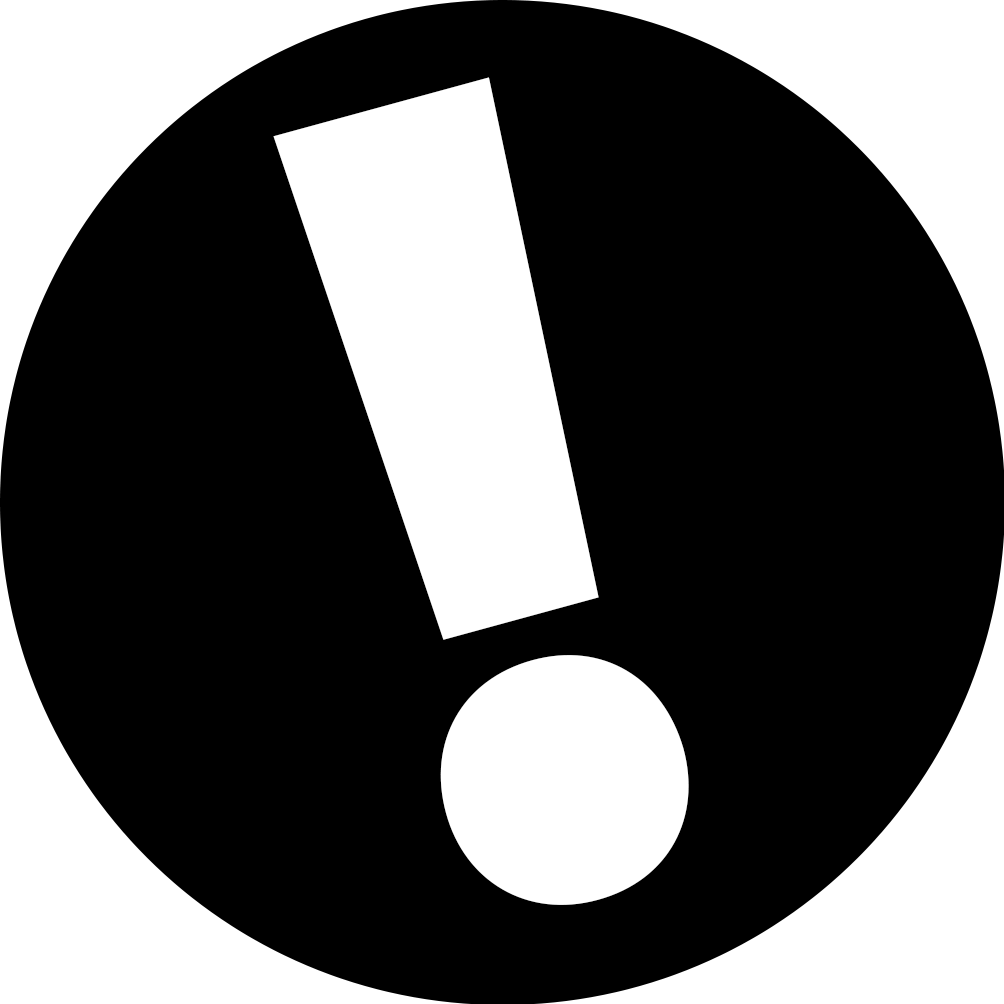
<style>
.page{position:relative;width:1004px;height:1004px;background:#000000}
.page>*{position:absolute;margin:0}
.t1{font:1200px "MyriadPro-Black";color:#ffffff}
</style>
<div class="page">
<p class="t1" style="left:273px;top:77px;width:416px;height:828px;rotate:-15deg">!</p>
</div>
